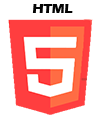
<style>
.page{position:relative;width:100px;height:115px;background:#ffffff}
.page>*{position:absolute;margin:0}
.t1{font:13.5px "ErasITC-Bold";color:#040404}
</style>
<div class="page">
<p class="t1" style="left:32px;top:4px;width:41px;height:9px">HTML</p>
</div>
